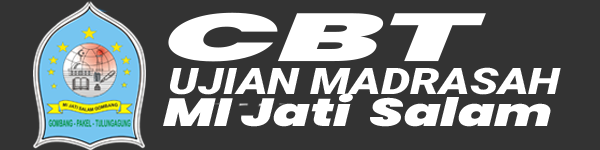
<style>
.page{position:relative;width:600px;height:150px;background:#333333}
.page>*{position:absolute;margin:0}
.t1{font:67.4px "Poppins-BlackItalic";color:#ffffff;scale:2.26 1}
.t2{font:36.4px "Roboto-BlackItalic";color:#ffffff;scale:1.27 1}
.t3{font:39.1px "Poppins-BlackItalic";color:#ffffff;scale:1.38 1}
</style>
<div class="page">
<p class="t1" style="left:168px;top:12px;width:318px;height:50px">CBT</p>
<p class="t2" style="left:170px;top:67px;width:391px;height:28px">UJIAN MADRASAH</p>
<p class="t3" style="left:163px;top:93px;width:388px;height:34px">MI Jati  Salam</p>
</div>
